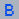
<style>
.page{position:relative;width:19px;height:19px;background:#abb4be}
.page>*{position:absolute;margin:0}
.t1{font:18px "SynchroLET";letter-spacing:0.025em;color:#0650e7}
</style>
<div class="page">
<p class="t1" style="left:4px;top:4px;width:10px;height:12px">b</p>
</div>
